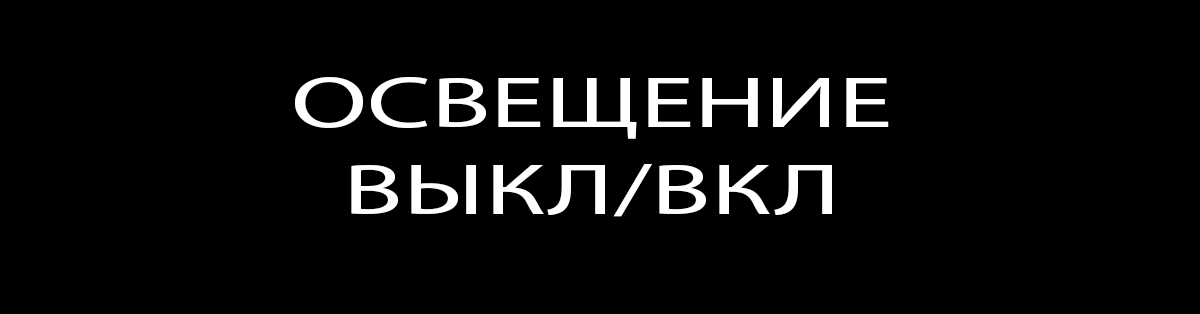
<style>
.page{position:relative;width:1200px;height:314px;background:#000000}
.page>*{position:absolute;margin:0}
.t1{font:72px "MyriadPro-Regular";color:#ffffff;scale:1.53 1}
</style>
<div class="page">
<p class="t1" style="left:295px;top:77px;width:594px;height:140px;text-align:center">ОСВЕЩЕНИЕ<br>ВЫКЛ/ВКЛ</p>
</div>
